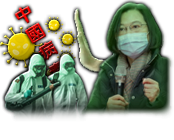
<style>
.page{position:relative;width:174px;height:140px;background:#ffffff}
.page>*{position:absolute;margin:0}
.t1{font:22.1px "FZZJ-MSHLFW"}
</style>
<div class="page">
<p class="t1" style="left:14px;top:6px;width:53px;height:72px;rotate:-31deg">中国病毒</p>
</div>
